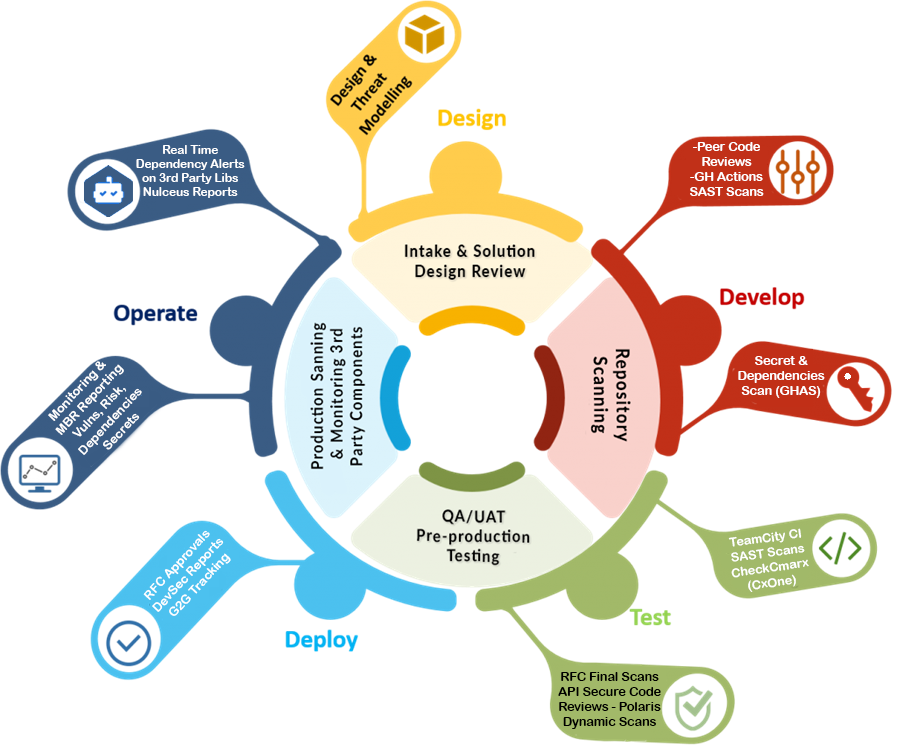
<style>
.page{position:relative;width:897px;height:753px;background:#ffffff}
.page>*{position:absolute;margin:0}
.t1{font:11.8px "ArialRoundedMTBold";color:#ffffff}
.t2{font:12.5px "ArialRoundedMTBold";color:#ffffff}
.t3{font:12.5px "ArialRoundedMTBold";color:#000000}
</style>
<div class="page">
<p class="t1" style="left:136px;top:145px;width:109px;height:53px;text-align:center">Real Time<br>Dependency Alerts<br>on 3rd Party Libs<br>Nulceus Reports</p>
<p class="t2" style="left:690px;top:142px;width:74px;height:54px;text-align:center">-Peer Code Reviews <br>-GH Actions<br>SAST Scans</p>
<p class="t2" style="left:48px;top:361px;width:94px;height:94px;text-align:center;rotate:-47deg">Monitoring &amp;<br> MBR Reporting<br>Vulns, Risk, Dependencies<br>Secrets</p>
<p class="t2" style="left:738px;top:356px;width:87px;height:42px;text-align:center">Secret &amp; Dependencies Scan (GHAS)</p>
<p class="t2" style="left:143px;top:530px;width:88px;height:86px;text-align:center;rotate:-47deg">RFC Approvals<br>DevSec Reports<br>G2G Tracking</p>
<p class="t2" style="left:728px;top:528px;width:81px;height:64px;text-align:center;rotate:-8deg">TeamCity CI <br>SAST Scans<br>CheckCmarx<br>(CxOne)</p>
<p class="t3" style="left:558px;top:672px;width:103px;height:57px;text-align:center">RFC Final Scans<br>API Secure Code<br>Reviews - Polaris<br>Dynamic Scans</p>
</div>
